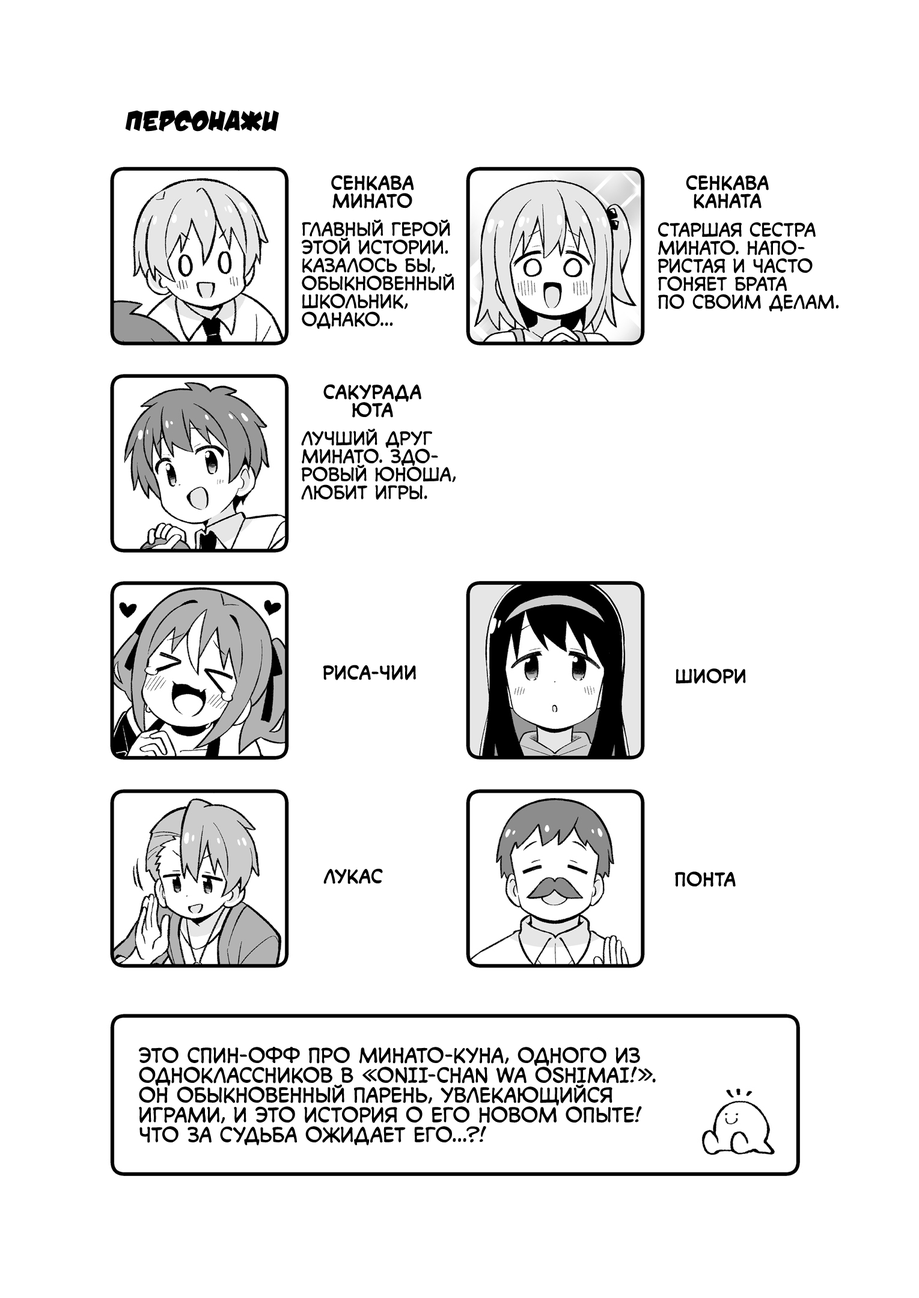
<style>
.page{position:relative;width:919px;height:1298px;background:#ffffff}
.page>*{position:absolute;margin:0}
.t1{font:28.8px "v_DamnNoisyKids";color:#000000;text-transform:uppercase}
.t2{font:18px "v_CCMonologous";color:#000000;text-transform:uppercase;font-weight:bold}
.t3{font:18px "v_CCMonologous";color:#000000;text-transform:uppercase}
.t4{font:19.8px "v_CCMonologous";color:#000000;text-transform:uppercase}
</style>
<div class="page">
<p class="t1" style="left:125px;top:109px;width:154px;height:23px">Персонажи</p>
<p class="t2" style="left:331px;top:175px;width:83px;height:34px;text-align:center">Сенкава<br>Минато</p>
<p class="t2" style="left:686px;top:175px;width:83px;height:34px;text-align:center">Сенкава<br>Каната</p>
<p class="t3" style="left:302px;top:219px;width:152px;height:110px">Главный герой<br>этой истории.<br>Казалось бы,<br>обыкновенный<br>школьник,<br>однако...</p>
<p class="t3" style="left:658px;top:222px;width:181px;height:90px">Старшая сестра<br>Минато. Напо-<br>ристая и часто<br>гоняет брата<br>по своим делам.</p>
<p class="t2" style="left:323px;top:384px;width:98px;height:34px;text-align:center">Сакурада<br>Юта</p>
<p class="t3" style="left:301px;top:428px;width:154px;height:72px">Лучший друг<br>Минато. Здо-<br>ровый юноша,<br>любит игры.</p>
<p class="t2" style="left:323px;top:665px;width:93px;height:15px">Риса-чии</p>
<p class="t2" style="left:675px;top:668px;width:71px;height:16px">Шиори</p>
<p class="t2" style="left:323px;top:868px;width:60px;height:16px">Лукас</p>
<p class="t2" style="left:675px;top:871px;width:60px;height:16px">Понта</p>
<p class="t4" style="left:139px;top:1047px;width:517px;height:98px">Это спин-офф про Минато-куна, одного из<br>одноклассников в «Onii-chan wa Oshimai!».<br>Он обыкновенный парень, увлекающийся<br>играми, и это история о его новом опыте!<br>Что за судьба ожидает его...?!</p>
</div>
